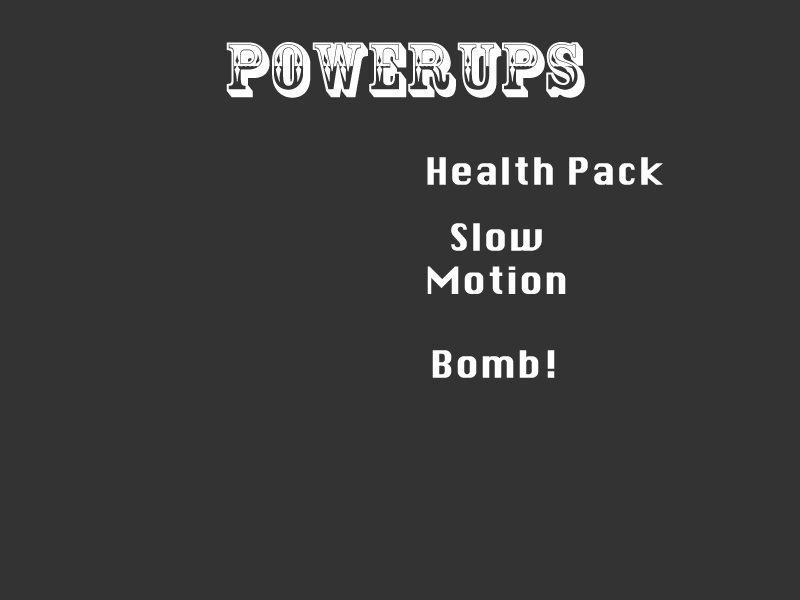
<style>
.page{position:relative;width:800px;height:600px;background:#333333}
.page>*{position:absolute;margin:0}
.t1{font:72px "RosewoodStd-Regular";color:#ffffff;font-weight:bold}
.t2{font:36px "Silom";color:#ffffff;font-weight:bold}
</style>
<div class="page">
<p class="t1" style="left:226px;top:42px;width:359px;height:56px">Powerups</p>
<p class="t2" style="left:427px;top:157px;width:236px;height:28px">Health Pack</p>
<p class="t2" style="left:427px;top:223px;width:139px;height:71px;text-align:center">Slow Motion</p>
<p class="t2" style="left:432px;top:350px;width:123px;height:28px">Bomb!</p>
</div>
